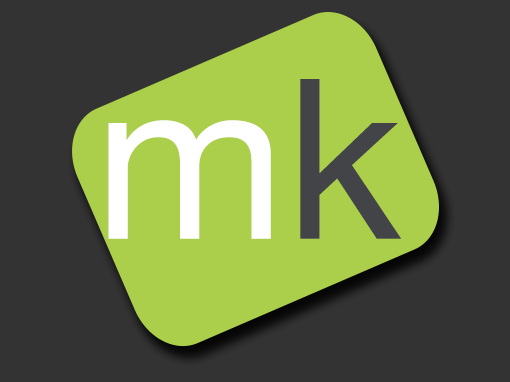
<style>
.page{position:relative;width:510px;height:382px;background:#333333}
.page>*{position:absolute;margin:0}
.t1{font:223.5px "HelveticaNeue";color:#ffffff}
.t2{font:223.5px "HelveticaNeue";color:#434448}
</style>
<div class="page">
<p class="t1" style="left:108px;top:79px;width:293px;height:160px">m<span class="t2">k</span></p>
</div>
